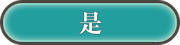
<style>
.page{position:relative;width:180px;height:45px;background:#239e9f}
.page>*{position:absolute;margin:0}
.t1{font:24px "RyuminPro-ExBold";color:#fdfbf9}
</style>
<div class="page">
<p class="t1" style="left:79px;top:11px;width:23px;height:23px">是</p>
</div>
